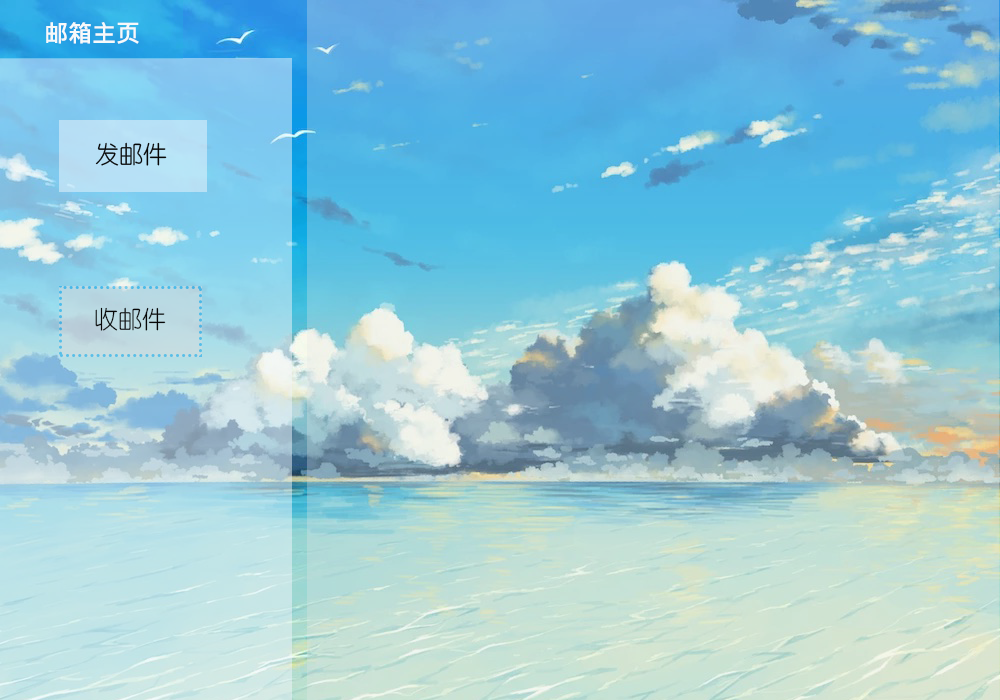
<style>
.page{position:relative;width:1000px;height:700px}
.page>*{position:absolute;margin:0}
.t1{font:24px "MicrosoftJhengHeiBold";color:#f7f9fa}
.t2{font:24px "YouYuan";color:#070707}
</style>
<div class="page">
<p class="t1" style="left:46px;top:22px;width:93px;height:22px">邮箱主页</p>
<p class="t2" style="left:95px;top:307px;width:71px;height:24px">收邮件</p>
</div>
